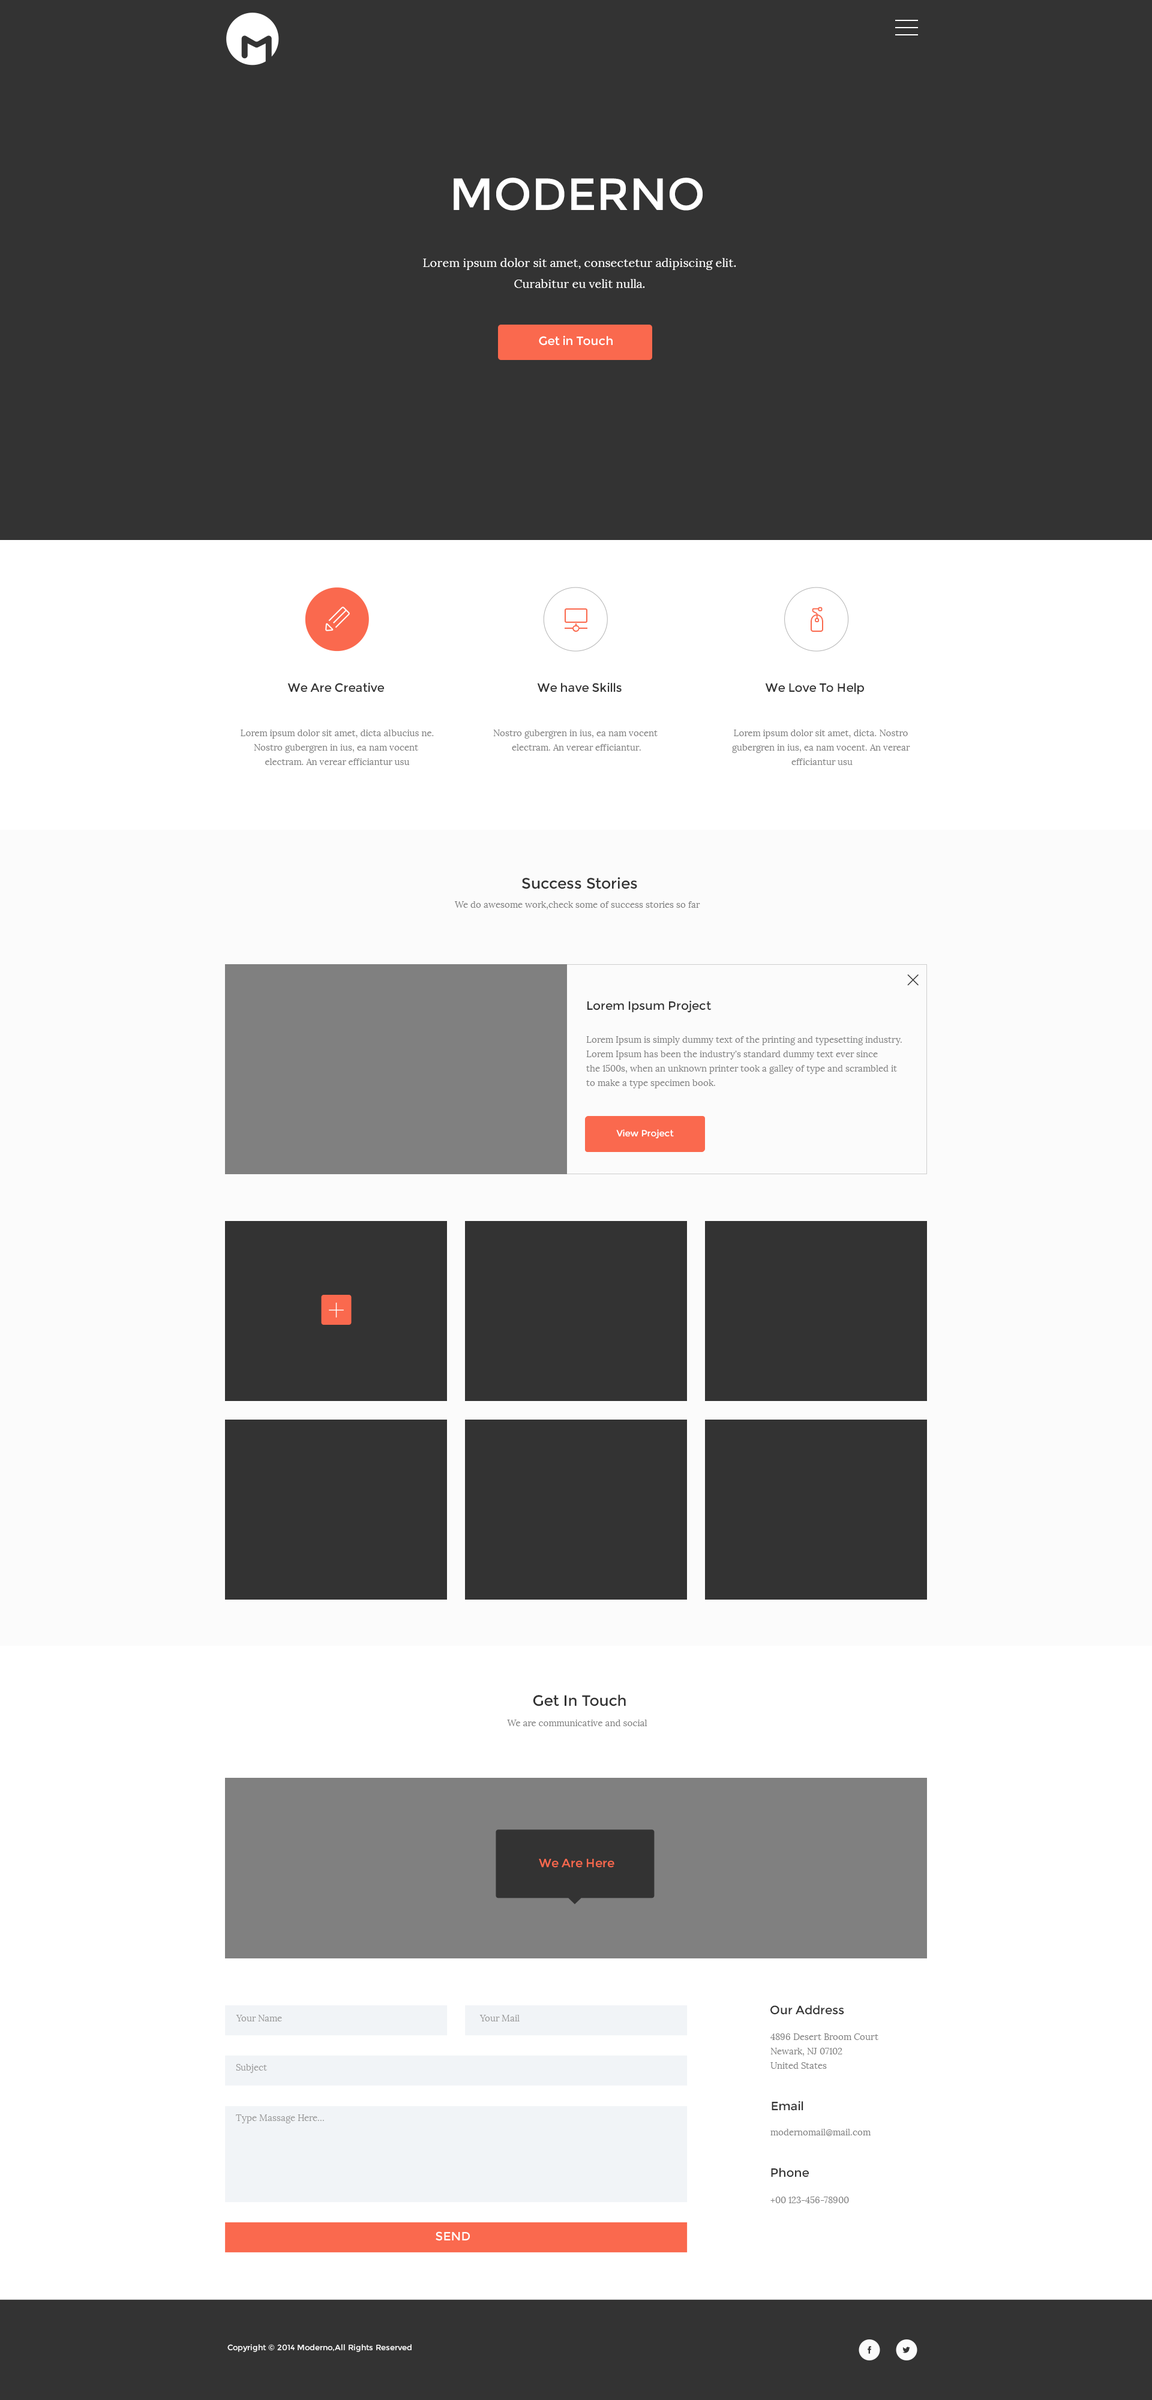
<style>
.page{position:relative;width:1152px;height:2400px;background:#333333}
.page>*{position:absolute;margin:0}
.t1{font:45px "Montserrat-Regular";color:#ffffff}
.t2{font:12px/21px "Lora-Regular";color:#ffffff}
.t3{font:12px "Montserrat-Regular";color:#ffffff}
.t4{font:12px "Montserrat-Regular";color:#333333}
.t5{font:9px/14.4px "Lora-Regular";color:#808080}
.t6{font:15px "Montserrat-Regular";color:#333333}
.t7{font:9px "Lora-Regular";color:#808080}
.t8{font:9px "Montserrat-Regular";color:#ffffff}
.t9{font:12px "Montserrat-Regular";color:#fa694e}
.t10{font:9px "Lora-Regular";color:#999999}
.t11{font:7.8px "Montserrat-Regular";color:#fbfbfb}
</style>
<div class="page">
<p class="t1" style="left:454px;top:178px;width:249px;height:33px">MODERNO</p>
<p class="t2" style="left:423px;top:258px;width:313px;height:30px;text-align:center">Lorem ipsum dolor sit amet, consectetur adipiscing elit. <br>Curabitur eu velit nulla.</p>
<p class="t3" style="left:539px;top:335px;width:74px;height:11px">Get in Touch</p>
<p class="t4" style="left:287px;top:682px;width:97px;height:10px">We Are Creative</p>
<p class="t4" style="left:537px;top:682px;width:85px;height:10px">We have Skills</p>
<p class="t4" style="left:765px;top:683px;width:99px;height:11px">We Love To Help</p>
<p class="t5" style="left:241px;top:730px;width:193px;height:35px;text-align:center">Lorem ipsum dolor sit amet, dicta albucius ne.<br>Nostro gubergren in ius, ea nam vocent <br>electram. An verear efficiantur usu</p>
<p class="t5" style="left:493px;top:730px;width:165px;height:21px;text-align:center">Nostro gubergren in ius, ea nam vocent <br>electram. An verear efficiantur.</p>
<p class="t5" style="left:732px;top:730px;width:178px;height:35px;text-align:center">Lorem ipsum dolor sit amet, dicta. Nostro <br>gubergren in ius, ea nam vocent. An verear <br>efficiantur usu</p>
<p class="t6" style="left:522px;top:877px;width:115px;height:12px">Success Stories</p>
<p class="t7" style="left:455px;top:901px;width:245px;height:9px">We do awesome work,check some of success stories so far</p>
<p class="t4" style="left:587px;top:1000px;width:125px;height:13px">Lorem Ipsum Project</p>
<p class="t5" style="left:586px;top:1036px;width:316px;height:52px">Lorem Ipsum is simply dummy text of the printing and typesetting industry. <br>Lorem Ipsum has been the industry's standard dummy text ever since <br>the 1500s, when an unknown printer took a galley of type and scrambled it <br>to make a type specimen book.</p>
<p class="t8" style="left:616px;top:1129px;width:58px;height:10px">View Project</p>
<p class="t6" style="left:533px;top:1694px;width:93px;height:12px">Get In Touch</p>
<p class="t7" style="left:507px;top:1720px;width:140px;height:6px">We are communicative and social</p>
<p class="t9" style="left:539px;top:1859px;width:75px;height:9px">We Are Here</p>
<p class="t4" style="left:770px;top:2005px;width:74px;height:10px">Our Address</p>
<p class="t10" style="left:236px;top:2015px;width:46px;height:6px">Your Name</p>
<p class="t10" style="left:479px;top:2015px;width:41px;height:6px">Your Mail</p>
<p class="t5" style="left:770px;top:2033px;width:108px;height:36px">4896 Desert Broom Court<br>Newark, NJ 07102<br>United States</p>
<p class="t10" style="left:236px;top:2064px;width:31px;height:9px">Subject</p>
<p class="t4" style="left:772px;top:2101px;width:31px;height:10px">Email</p>
<p class="t10" style="left:236px;top:2114px;width:88px;height:9px">Type Massage Here...</p>
<p class="t7" style="left:770px;top:2129px;width:101px;height:7px">modernomail@mail.com</p>
<p class="t4" style="left:771px;top:2168px;width:38px;height:9px">Phone</p>
<p class="t7" style="left:770px;top:2196px;width:79px;height:7px">+00 123-456-78900</p>
<p class="t3" style="left:436px;top:2231px;width:34px;height:10px">SEND</p>
<p class="t11" style="left:227px;top:2344px;width:185px;height:8px">Copyright © 2014 Moderno,All Rights Reserved</p>
</div>
